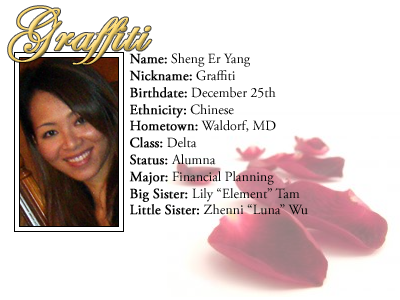
<style>
.page{position:relative;width:400px;height:300px;background:#ffffff}
.page>*{position:absolute;margin:0}
.t1{font:60px "EdwardianScriptITC";font-weight:bold}
.t2{font:14px "AGaramondPro-Regular";color:#000000}
.t3{font:14px "AGaramondPro-Regular";color:#000000;font-weight:bold}
</style>
<div class="page">
<p class="t1" style="left:8px;top:6px;width:144px;height:59px">Graffiti</p>
<p class="t2" style="left:129px;top:53px;width:179px;height:162px"><span class="t3">Name:</span> Sheng Er Yang<br><span class="t3">Nickname:</span> Graffiti<br><span class="t3">Birthdate:</span> December 25th<br><span class="t3">Ethnicity:</span> Chinese<br><span class="t3">Hometown:</span> Waldorf, MD<br><span class="t3">Class:</span> Delta<br><span class="t3">Status: </span>Alumna<br><span class="t3">Major:</span> Financial Planning<br><span class="t3">Big Sister: </span>Lily “Element” Tam<br><span class="t3">Little Sister:</span> Zhenni “Luna” Wu</p>
</div>
